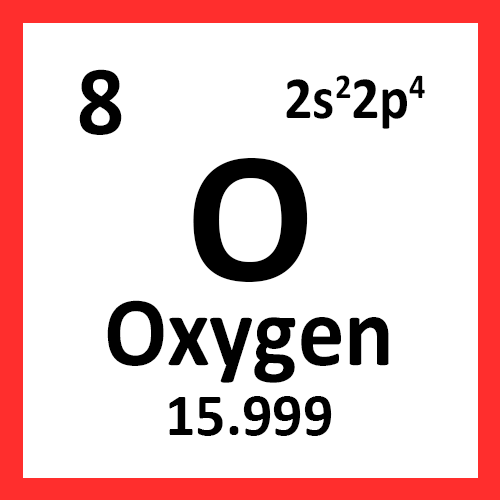
<style>
.page{position:relative;width:500px;height:500px;background:#ffffff}
.page>*{position:absolute;margin:0}
.t1{font:100px "Calibri-Bold";color:#000000;scale:0.93 1}
.t2{font:60px "Calibri-Bold";color:#000000;scale:0.93 1}
.t3{font:190px "Calibri-Bold";color:#000000}
.t4{font:60px "Calibri-Bold";color:#000000}
</style>
<div class="page">
<p class="t1" style="left:79px;top:69px;width:43px;height:66px">8</p>
<p class="t2" style="left:286px;top:75px;width:139px;height:54px">2s22p4</p>
<p class="t3" style="left:193px;top:158px;width:115px;height:124px">O</p>
<p class="t1" style="left:107px;top:300px;width:282px;height:83px">Oxygen</p>
<p class="t4" style="left:169px;top:396px;width:163px;height:40px">15.999</p>
</div>
